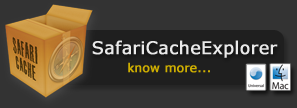
<style>
.page{position:relative;width:297px;height:108px;background:#333333}
.page>*{position:absolute;margin:0}
.t1{font:17.4px "Verdana";color:#eaeaea;font-weight:bold}
.t2{font:12px "Verdana";color:#ceae00;font-weight:bold}
</style>
<div class="page">
<p class="t1" style="left:92px;top:40px;width:186px;height:18px">SafariCacheExplorer</p>
<p class="t2" style="left:128px;top:62px;width:82px;height:11px">know more...</p>
</div>
